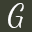
<style>
.page{position:relative;width:32px;height:32px;background:#3b3f31}
.page>*{position:absolute;margin:0}
.t1{font:30px "DancingScript";color:#ffffff}
</style>
<div class="page">
<p class="t1" style="left:8px;top:3px;width:16px;height:25px">G</p>
</div>
